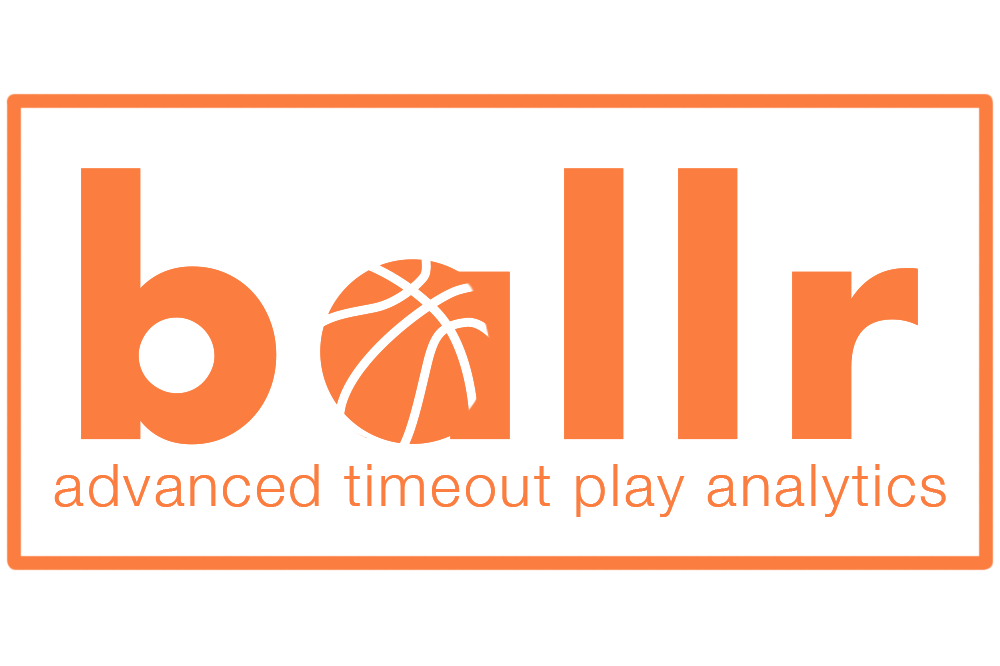
<style>
.page{position:relative;width:1000px;height:666px;background:#ffffff}
.page>*{position:absolute;margin:0}
.t1{font:326.5px "Futura-Bold";letter-spacing:0.05em;color:#fb7e40}
.t2{font:58.8px "HelveticaNeue-Light";letter-spacing:0.05em;color:#fb7e40}
</style>
<div class="page">
<p class="t1" style="left:81px;top:168px;width:837px;height:277px">ballr</p>
<p class="t2" style="left:54px;top:464px;width:892px;height:53px">advanced timeout play analytics</p>
</div>
